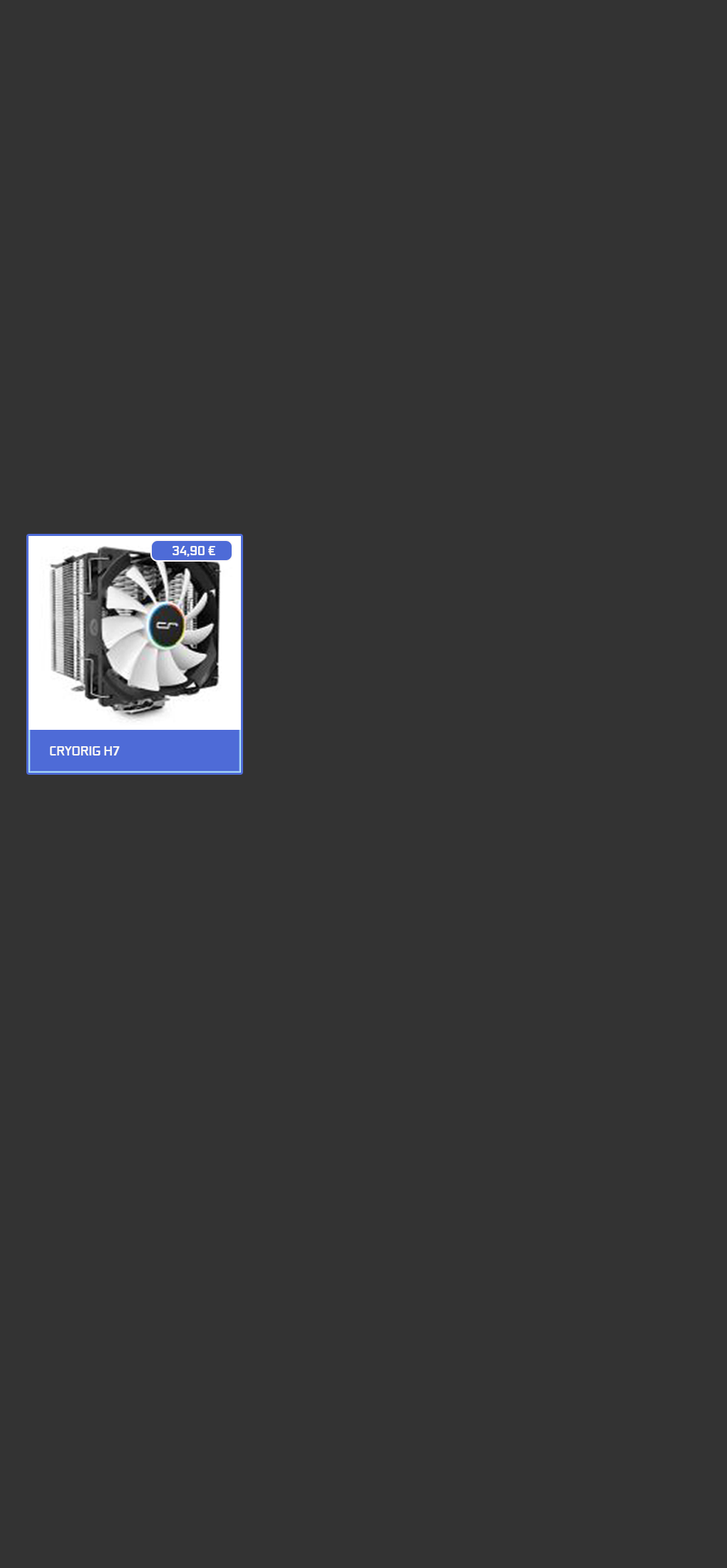
<style>
.page{position:relative;width:727px;height:1568px;background:#333333}
.page>*{position:absolute;margin:0}
.t1{font:12.8px "GeForce-Bold";color:#f8f8f9}
.t2{font:12.8px "GeForce-Bold";color:#f6f5f5}
</style>
<div class="page">
<p class="t1" style="left:172px;top:546px;width:43px;height:11px">34,90 €</p>
<p class="t2" style="left:50px;top:746px;width:70px;height:9px">CRYORIG H7</p>
</div>
